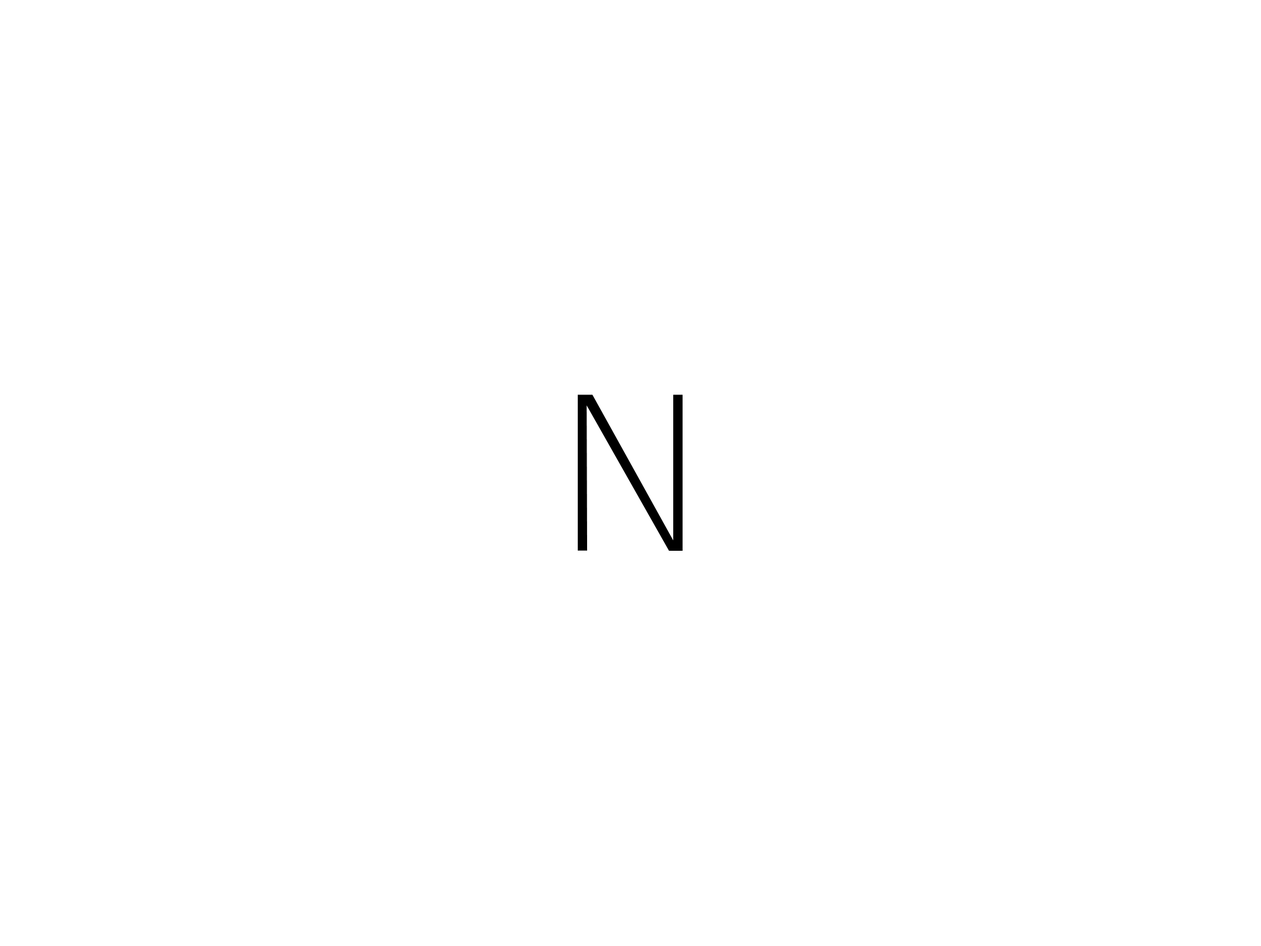
<style>
.page{position:relative;width:1261px;height:946px;background:#ffffff}
.page>*{position:absolute;margin:0}
.t1{font:222.4px "Alcubierre";color:#000000}
</style>
<div class="page">
<p class="t1" style="left:577px;top:394px;width:106px;height:156px">N</p>
</div>
